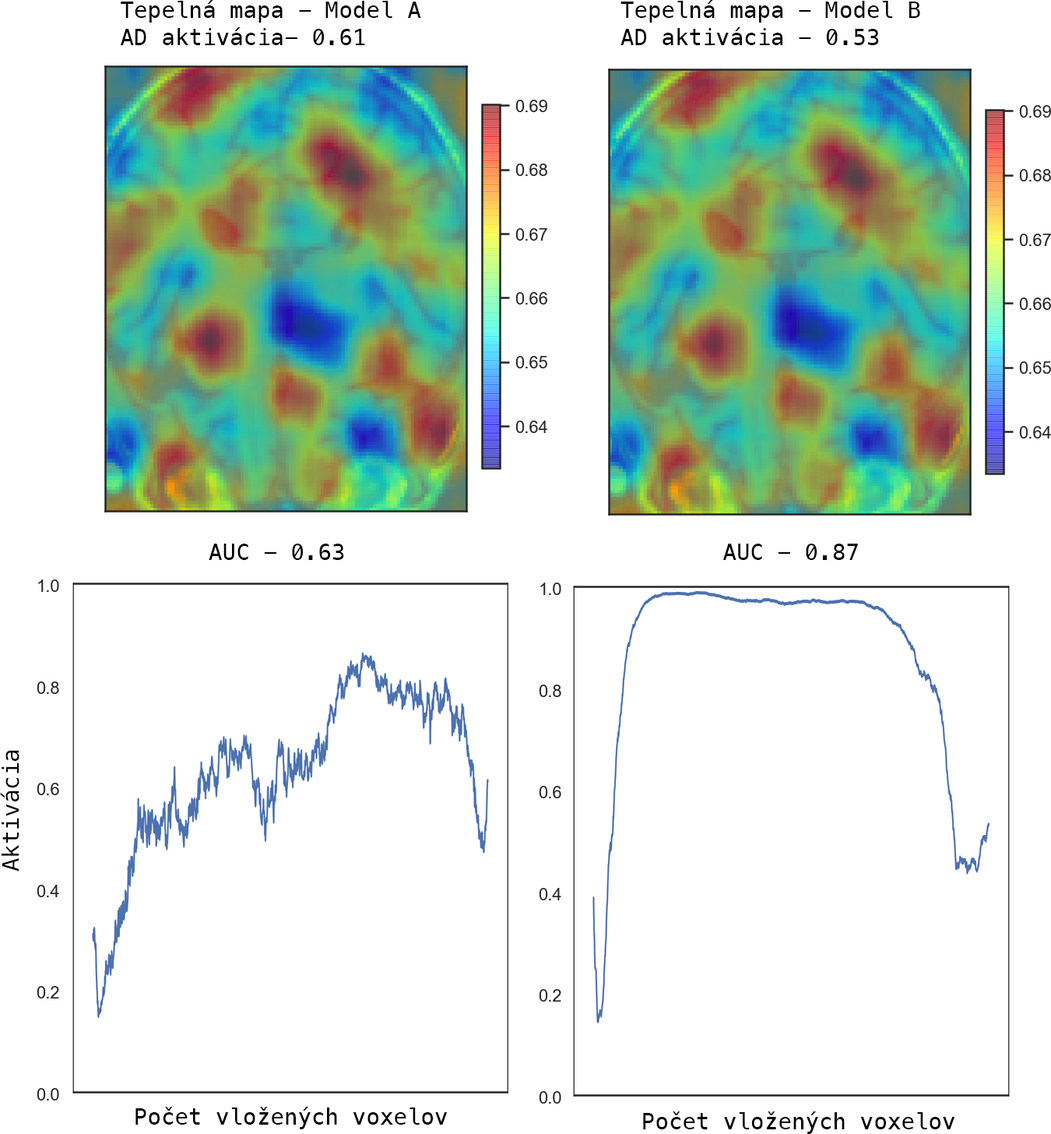
<style>
.page{position:relative;width:1051px;height:1134px;background:#ffffff}
.page>*{position:absolute;margin:0}
.t1{font:22.7px "Menlo-Regular";color:#000000}
</style>
<div class="page">
<p class="t1" style="left:121px;top:0px;width:300px;height:45px">Tepelná mapa - Model A<br>AD aktivácia- 0.61</p>
<p class="t1" style="left:621px;top:0px;width:300px;height:45px">Tepelná mapa - Model B<br>AD aktivácia - 0.53</p>
<p class="t1" style="left:209px;top:544px;width:135px;height:16px">AUC - 0.63</p>
<p class="t1" style="left:724px;top:544px;width:134px;height:16px">AUC - 0.87</p>
<p class="t1" style="left:0px;top:750px;width:19px;height:122px;rotate:-90deg">Aktivácia</p>
<p class="t1" style="left:136px;top:1107px;width:312px;height:22px">Počet vložených voxelov</p>
<p class="t1" style="left:643px;top:1111px;width:313px;height:23px">Počet vložených voxelov</p>
</div>
